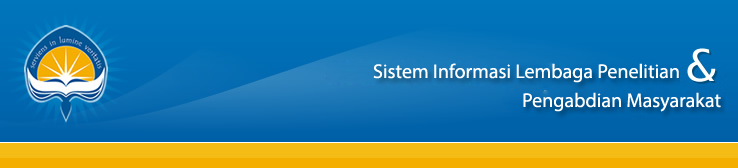
<style>
.page{position:relative;width:738px;height:168px}
.page>*{position:absolute;margin:0}
.t1{font:20px "MyriadPro-Regular";color:#ffffff}
</style>
<div class="page">
<p class="t1" style="left:373px;top:63px;width:306px;height:20px">Sistem Informasi Lembaga Penelitian</p>
<p class="t1" style="left:523px;top:92px;width:198px;height:20px">Pengabdian Masyarakat</p>
</div>
